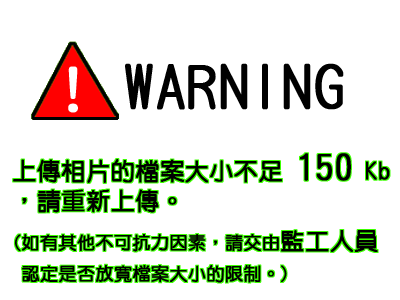
<style>
.page{position:relative;width:400px;height:300px;background:#ffffff}
.page>*{position:absolute;margin:0}
.t1{font:60px "DFYuan-W5-WIN-BF";color:#000000;font-weight:bold}
.t2{font:60.6px "DFYuan-W5-WIN-BF";color:#ffffff;font-weight:bold}
.t3{font:18px/36px "DFYuan-W5-WIN-BF";color:#000000;font-weight:bold}
.t4{font:24px/40px "DFYuan-W5-WIN-BF";color:#000000;font-weight:bold}
.t5{font:36px/40px "DFYuan-W5-WIN-BF";color:#000000;font-weight:bold}
.t6{font:24px/36px "DFYuan-W5-WIN-BF";color:#000000;font-weight:bold}
</style>
<div class="page">
<p class="t1" style="left:125px;top:63px;width:219px;height:47px">WARNING</p>
<p class="t2" style="left:68px;top:66px;width:10px;height:47px">!</p>
<p class="t3" style="left:13px;top:153px;width:377px;height:130px"><span class="t4">上傳相片的檔案大小不足 </span><span class="t5">150</span><span class="t4"> Kb<br>，請重新上傳。<br></span>(如有其他不可抗力因素，請交由<span class="t6">監工人員<br></span> 認定是否放寬檔案大小的限制。)</p>
</div>
